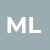
<style>
.page{position:relative;width:50px;height:50px;background:#9babb2}
.page>*{position:absolute;margin:0}
.t1{font:22.8px "Montserrat-Bold";color:#ffffff}
</style>
<div class="page">
<p class="t1" style="left:7px;top:17px;width:34px;height:16px">ML</p>
</div>
